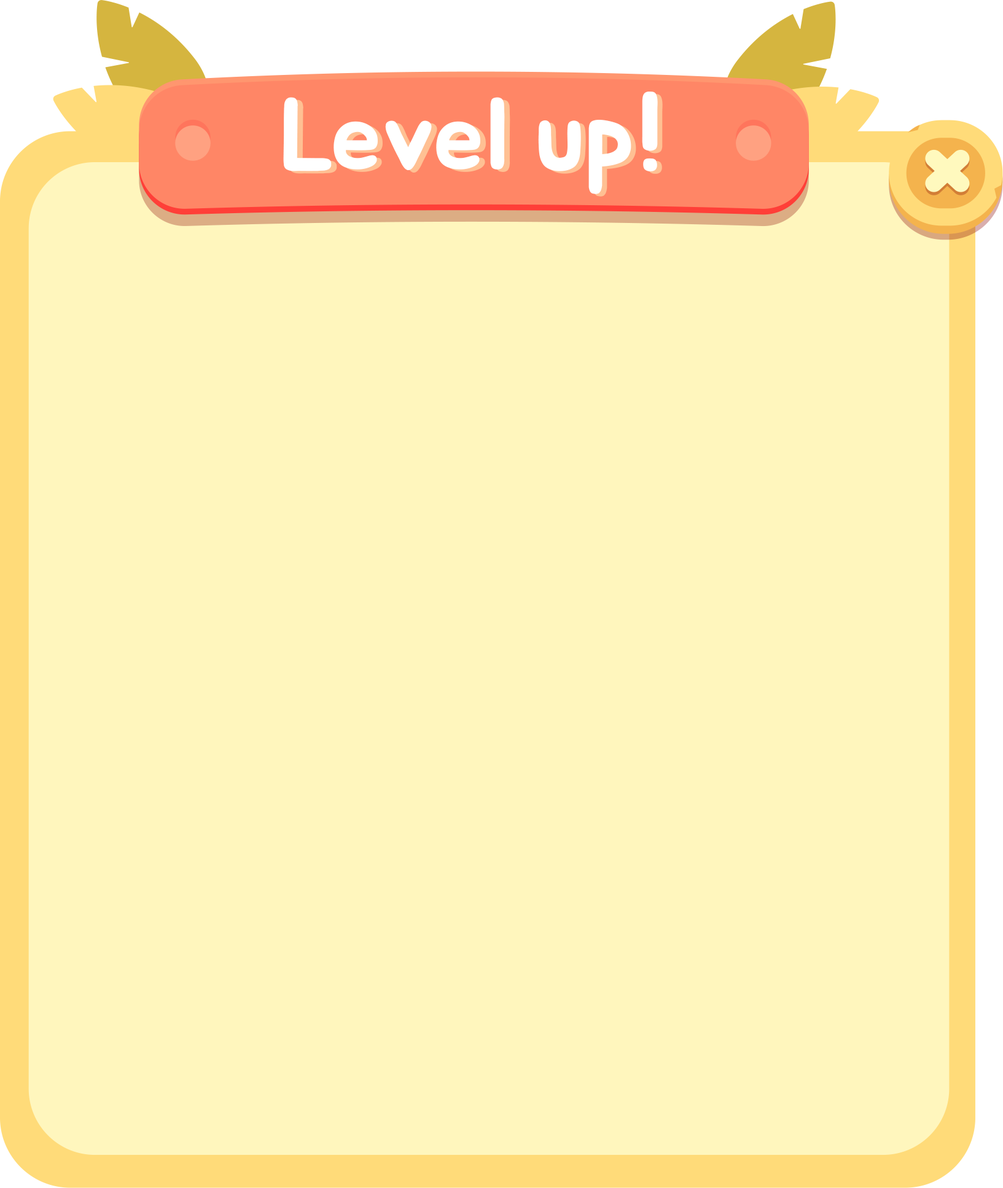
<style>
.page{position:relative;width:1003px;height:1188px;background:#fff6bd}
.page>*{position:absolute;margin:0}
.t1{font:102.4px "BMJUA";color:#ffffff}
.t2{font:102.4px "BMJUA"}
</style>
<div class="page">
<p class="t1" style="left:283px;top:92px;width:375px;height:102px">Level up!</p>
<p class="t2" style="left:289px;top:94px;width:374px;height:103px">Level up!</p>
</div>
